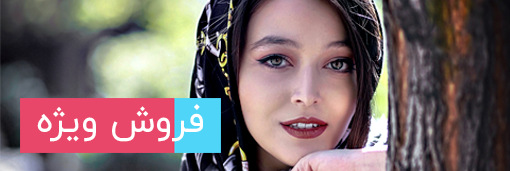
<style>
.page{position:relative;width:510px;height:171px}
.page>*{position:absolute;margin:0}
.t1{font:36.8px "IRANYekan";color:#ffffff}
</style>
<div class="page">
<p class="t1" style="left:37px;top:104px;width:166px;height:38px">فروش ویژه</p>
</div>
